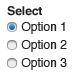
<style>
.page{position:relative;width:75px;height:75px;background:#ffffff}
.page>*{position:absolute;margin:0}
.t1{font:12px "Helvetica-Bold";color:#222222}
.t2{font:12px/18px "Helvetica";color:#222222}
</style>
<div class="page">
<p class="t1" style="left:7px;top:6px;width:35px;height:10px">Select</p>
<p class="t2" style="left:21px;top:22px;width:46px;height:48px">Option 1<br>Option 2<br>Option 3</p>
</div>
